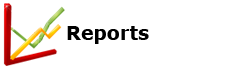
<style>
.page{position:relative;width:250px;height:66px;background:#ffffff}
.page>*{position:absolute;margin:0}
.t1{font:19px "Verdana-Bold";color:#000000}
</style>
<div class="page">
<p class="t1" style="left:67px;top:26px;width:82px;height:18px">Reports</p>
</div>
